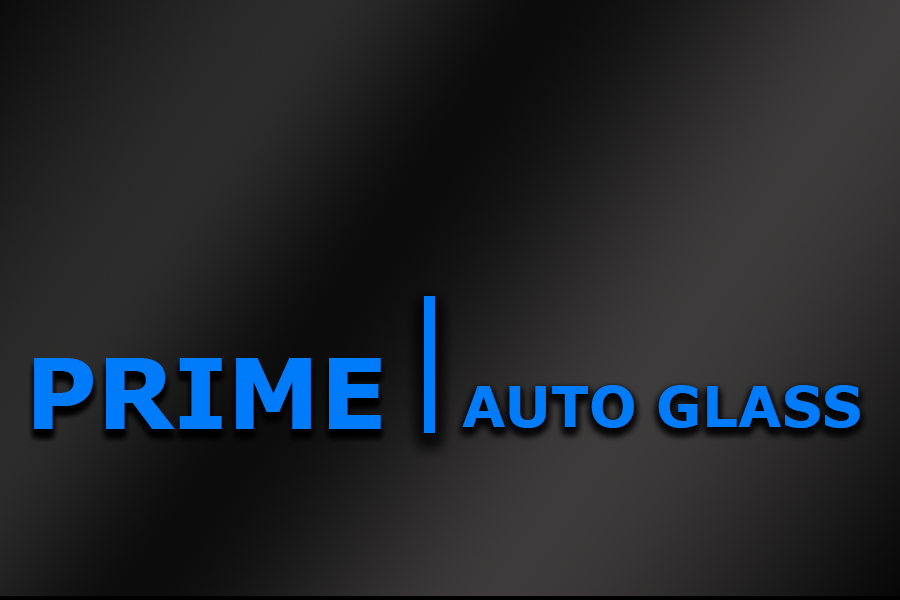
<style>
.page{position:relative;width:900px;height:600px}
.page>*{position:absolute;margin:0}
.t1{font:98px "Verdana-Bold";color:#007cfa}
.t2{font:56.3px "Verdana-Bold";color:#007cfa}
</style>
<div class="page">
<p class="t1" style="left:34px;top:358px;width:347px;height:71px">PRIME</p>
<p class="t2" style="left:462px;top:385px;width:398px;height:43px">AUTO GLASS</p>
</div>
